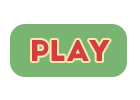
<style>
.page{position:relative;width:140px;height:100px;background:#ffffff}
.page>*{position:absolute;margin:0}
.t1{font:28px "BigJohn";color:#d33e43}
</style>
<div class="page">
<p class="t1" style="left:32px;top:40px;width:78px;height:21px">PLAY</p>
</div>
